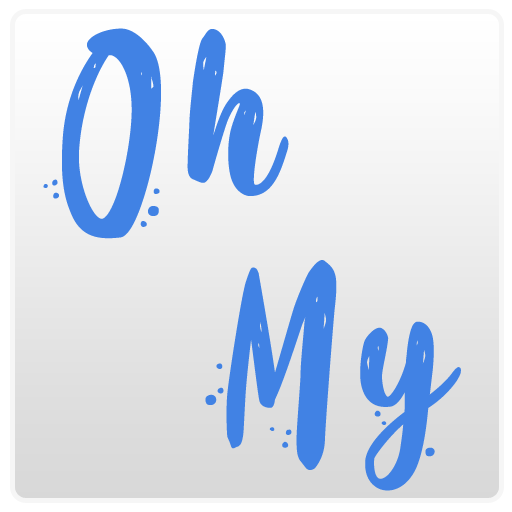
<style>
.page{position:relative;width:512px;height:512px}
.page>*{position:absolute;margin:0}
.t1{font:441.4px "Coaster-Quake---Personal-Use";letter-spacing:0.015em;color:#4182e4;font-weight:bold}
</style>
<div class="page">
<p class="t1" style="left:43px;top:28px;width:246px;height:211px">Oh</p>
<p class="t1" style="left:205px;top:260px;width:256px;height:231px">My</p>
</div>
